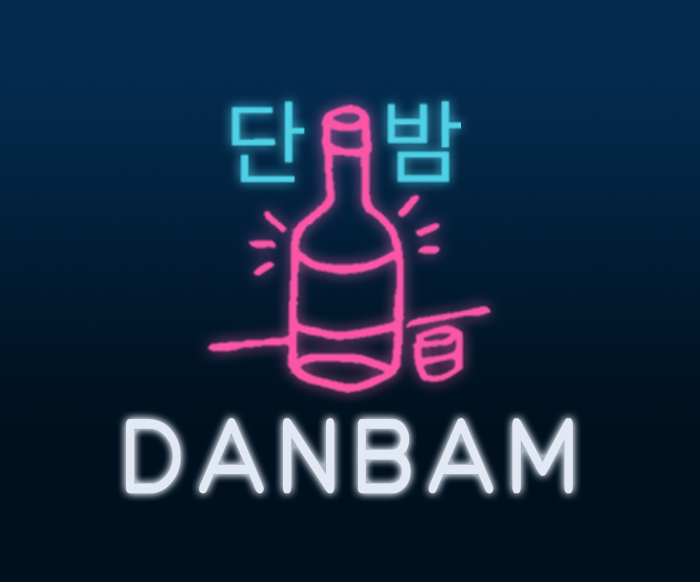
<style>
.page{position:relative;width:700px;height:582px}
.page>*{position:absolute;margin:0}
.t1{font:116.1px "Traffolight";letter-spacing:0.16em;color:#e2e9f4;scale:0.83 1}
</style>
<div class="page">
<p class="t1" style="left:126px;top:418px;width:447px;height:76px">DANBAM</p>
</div>
